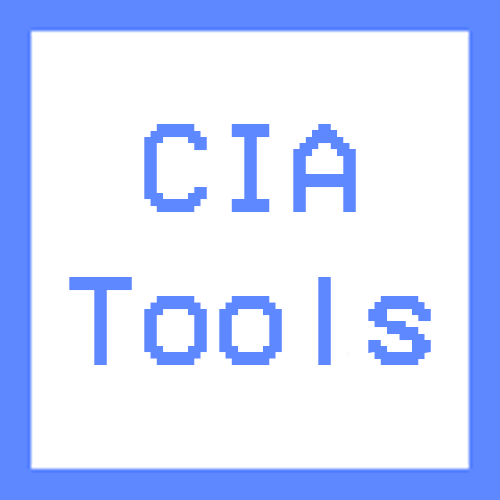
<style>
.page{position:relative;width:500px;height:500px;background:#ffffff}
.page>*{position:absolute;margin:0}
.t1{font:128px "VCROSDMono";color:#5e88ff}
</style>
<div class="page">
<p class="t1" style="left:69px;top:124px;width:362px;height:241px">CIA<br>Tools</p>
</div>
